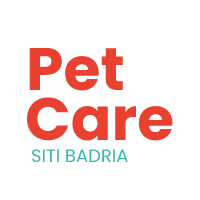
<style>
.page{position:relative;width:200px;height:200px;background:#ffffff}
.page>*{position:absolute;margin:0}
.t1{font:60px "Poppins-Bold";color:#e94130}
.t2{font:18px "Poppins-Regular";color:#3db8b1}
</style>
<div class="page">
<p class="t1" style="left:29px;top:48px;width:94px;height:43px">Pet</p>
<p class="t1" style="left:27px;top:97px;width:146px;height:44px">Care</p>
<p class="t2" style="left:32px;top:149px;width:96px;height:14px">SITI BADRIA</p>
</div>
